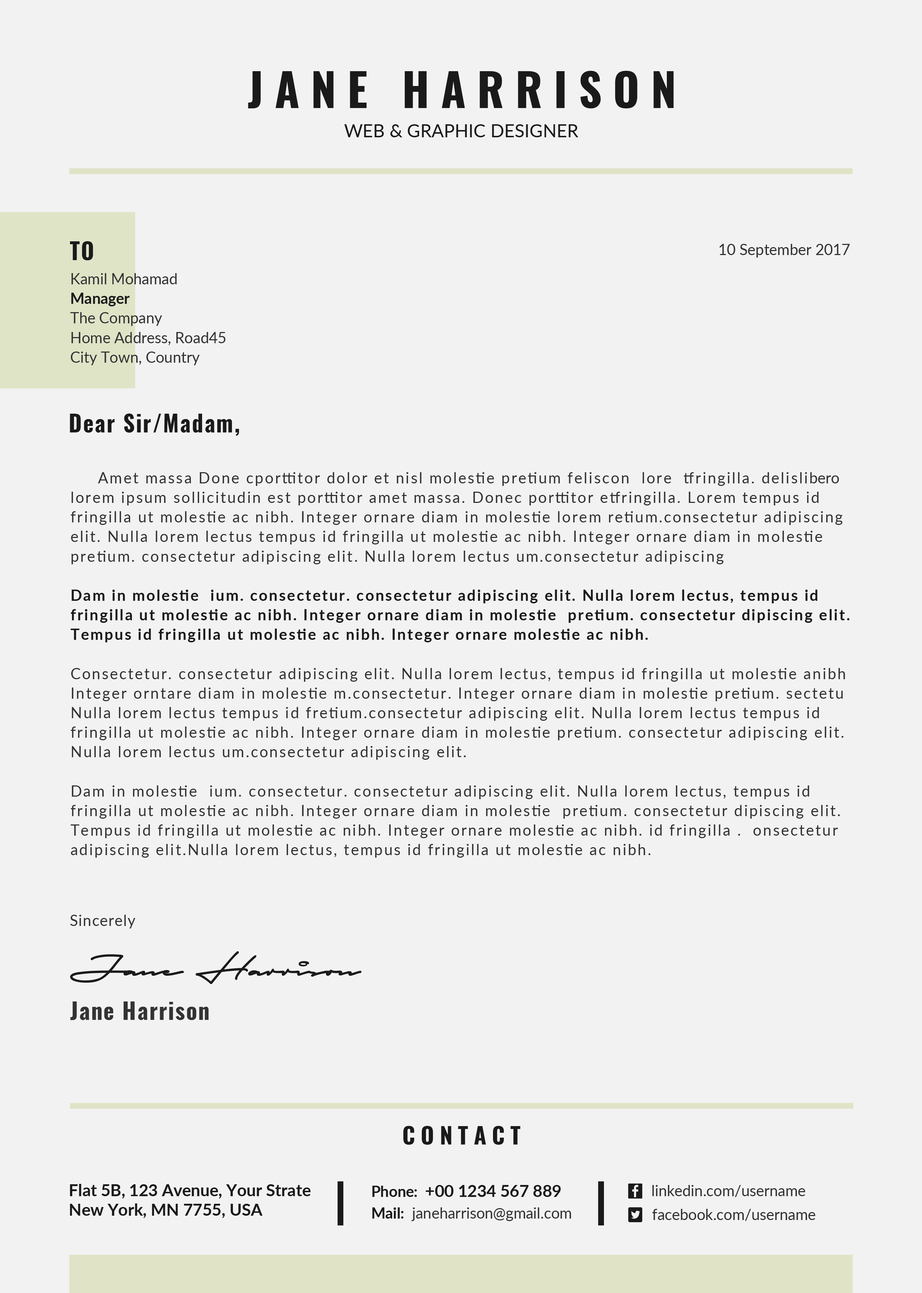
<style>
.page{position:relative;width:922px;height:1293px;background:#f2f2f2}
.page>*{position:absolute;margin:0}
.t1{font:45.2px "Oswald-Bold";letter-spacing:0.25em;color:#1a1a1a;text-transform:uppercase}
.t2{font:18px "Lato-Regular";color:#1a1a1a;text-transform:uppercase}
.t3{font:22.6px "Oswald-Bold";letter-spacing:0.05em;color:#1a1a1a;text-transform:uppercase}
.t4{font:15.1px "Lato-Regular";color:#333333}
.t5{font:15.1px/19.6px "Lato-Regular";color:#333333}
.t6{font:15.1px/19.6px "Lato-Bold";color:#1a1a1a}
.t7{font:22.6px "Oswald-Bold";letter-spacing:0.05em;color:#1a1a1a}
.t8{font:15.1px/19.6px "Lato-Regular";letter-spacing:0.1em;color:#333333}
.t9{font:15.1px/19.6px "Lato-Bold";letter-spacing:0.1em;color:#1a1a1a}
.t10{font:15.1px "Lato-Regular";letter-spacing:0.05em;color:#333333}
.t11{font:22.6px "Oswald-Bold";letter-spacing:0.05em;color:#333333}
.t12{font:22.6px "Oswald-Bold";letter-spacing:0.25em;color:#1a1a1a;text-transform:uppercase}
.t13{font:16.6px/19.6px "Lato-Bold";color:#1a1a1a}
.t14{font:16.6px "Lato-Bold";color:#1a1a1a}
.t15{font:15px "Lato-Bold";color:#1a1a1a}
.t16{font:15px "Lato-Regular";color:#333333}
</style>
<div class="page">
<p class="t1" style="left:248px;top:71px;width:426px;height:37px">Jane Harrison</p>
<p class="t2" style="left:344px;top:124px;width:234px;height:13px">Web &amp; Graphic Designer</p>
<p class="t3" style="left:70px;top:241px;width:23px;height:20px">To</p>
<p class="t4" style="left:719px;top:244px;width:131px;height:14px">10 September 2017</p>
<p class="t5" style="left:70px;top:273px;width:156px;height:92px">Kamil Mohamad<br><span class="t6">Manager<br></span>The Company<br>Home Address, Road45<br>City Town, Country</p>
<p class="t7" style="left:70px;top:413px;width:169px;height:23px">Dear Sir/Madam,</p>
<p class="t8" style="left:70px;top:472px;width:780px;height:386px">Amet massa Done cporttitor dolor et nisl molestie pretium feliscon  lore  tfringilla. delislibero lorem ipsum sollicitudin est porttitor amet massa. Donec porttitor etfringilla. Lorem tempus id fringilla ut molestie ac nibh. Integer ornare diam in molestie lorem retium.consectetur adipiscing elit. Nulla lorem lectus tempus id fringilla ut molestie ac nibh. Integer ornare diam in molestie pretium. consectetur adipiscing elit. Nulla lorem lectus um.consectetur adipiscing <br><br><span class="t9">Dam in molestie  ium. consectetur. consectetur adipiscing elit. Nulla lorem lectus, tempus id fringilla ut molestie ac nibh. Integer ornare diam in molestie  pretium. consectetur dipiscing elit. Tempus id fringilla ut molestie ac nibh. Integer ornare molestie ac nibh.<br></span><br>Consectetur. consectetur adipiscing elit. Nulla lorem lectus, tempus id fringilla ut molestie anibh Integer orntare diam in molestie m.consectetur. Integer ornare diam in molestie pretium. sectetu Nulla lorem lectus tempus id fretium.consectetur adipiscing elit. Nulla lorem lectus tempus id fringilla ut molestie ac nibh. Integer ornare diam in molestie pretium. consectetur adipiscing elit. Nulla lorem lectus um.consectetur adipiscing elit.<br><br>Dam in molestie  ium. consectetur. consectetur adipiscing elit. Nulla lorem lectus, tempus id fringilla ut molestie ac nibh. Integer ornare diam in molestie  pretium. consectetur dipiscing elit. Tempus id fringilla ut molestie ac nibh. Integer ornare molestie ac nibh. id fringilla .  onsectetur adipiscing elit.Nulla lorem lectus, tempus id fringilla ut molestie ac nibh.</p>
<p class="t10" style="left:70px;top:915px;width:66px;height:14px">Sincerely</p>
<p class="t11" style="left:70px;top:1002px;width:139px;height:19px">Jane Harrison</p>
<p class="t12" style="left:403px;top:1126px;width:117px;height:19px">Contact</p>
<p class="t13" style="left:70px;top:1184px;width:241px;height:35px">Flat 5B, 123 Avenue, Your Strate<br>New York, MN 7755, USA</p>
<p class="t14" style="left:372px;top:1185px;width:189px;height:12px"><span class="t15">Phone:  </span>+00 1234 567 889</p>
<p class="t4" style="left:652px;top:1185px;width:153px;height:13px">linkedin.com/username</p>
<p class="t16" style="left:372px;top:1208px;width:199px;height:14px"><span class="t15">Mail:</span>  janeharrison@gmail.com</p>
<p class="t4" style="left:652px;top:1209px;width:163px;height:13px">facebook.com/username</p>
</div>
